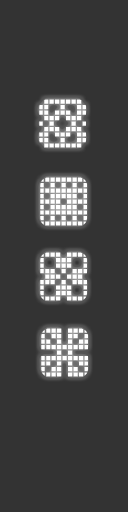
<style>
.page{position:relative;width:128px;height:512px;background:#333333}
.page>*{position:absolute;margin:0}
.t1{font:48px "Tile-Things";color:#ffffff}
</style>
<div class="page">
<p class="t1" style="left:39px;top:99px;width:47px;height:49px">f</p>
<p class="t1" style="left:40px;top:177px;width:47px;height:49px">g</p>
<p class="t1" style="left:40px;top:252px;width:47px;height:49px">j</p>
<p class="t1" style="left:41px;top:328px;width:47px;height:49px">n</p>
</div>
